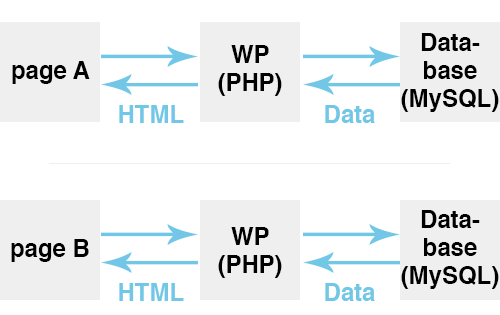
<style>
.page{position:relative;width:500px;height:315px;background:#ffffff}
.page>*{position:absolute;margin:0}
.t1{font:24px/28.1px "Helvetica-Bold";color:#000000}
.t2{font:24px "Helvetica-Bold";color:#000000}
.t3{font:24px "Helvetica-Bold";color:#72c7e7}
</style>
<div class="page">
<p class="t1" style="left:401px;top:33px;width:98px;height:79px;text-align:center">Data-<br>base<br>(MySQL)</p>
<p class="t1" style="left:218px;top:45px;width:64px;height:51px;text-align:center">WP<br>(PHP)</p>
<p class="t2" style="left:12px;top:61px;width:78px;height:23px">page A</p>
<p class="t3" style="left:119px;top:105px;width:65px;height:18px">HTML</p>
<p class="t3" style="left:325px;top:105px;width:50px;height:18px">Data</p>
<p class="t1" style="left:401px;top:210px;width:98px;height:79px;text-align:center">Data-<br>base<br>(MySQL)</p>
<p class="t1" style="left:218px;top:227px;width:64px;height:51px;text-align:center">WP<br>(PHP)</p>
<p class="t2" style="left:11px;top:239px;width:78px;height:23px">page B</p>
<p class="t3" style="left:119px;top:283px;width:65px;height:18px">HTML</p>
<p class="t3" style="left:325px;top:283px;width:50px;height:18px">Data</p>
</div>
